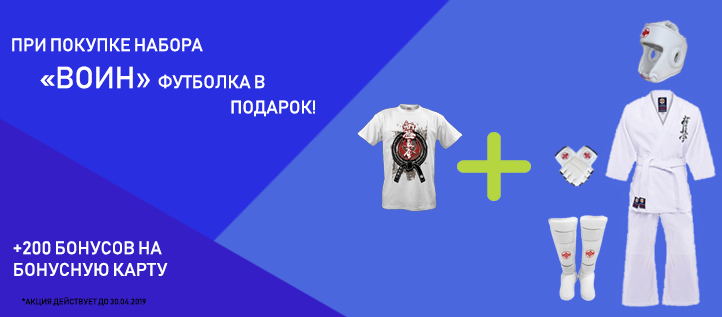
<style>
.page{position:relative;width:722px;height:317px;background:#4b67de}
.page>*{position:absolute;margin:0}
.t1{font:18px "Bahnschrift";color:#ffffff}
.t2{font:30px "Bahnschrift";color:#ffffff}
.t3{font:30px "ArialMT";color:#ffffff}
.t4{font:8px "Bahnschrift";color:#000000}
</style>
<div class="page">
<p class="t1" style="left:12px;top:38px;width:191px;height:14px">ПРИ ПОКУПКЕ НАБОРА</p>
<p class="t1" style="left:40px;top:66px;width:225px;height:23px"><span class="t2">«ВОИН</span><span class="t3">» </span>ФУТБОЛКА В</p>
<p class="t1" style="left:231px;top:100px;width:84px;height:17px">ПОДАРОК!</p>
<p class="t1" style="left:13px;top:241px;width:155px;height:35px">+200 БОНУСОВ НА <br>БОНУСНУЮ КАРТУ</p>
<p class="t4" style="left:22px;top:297px;width:124px;height:9px">*АКЦИЯ ДЕЙСТВУЕТ ДО 30.04.2019</p>
</div>
